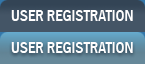
<style>
.page{position:relative;width:145px;height:64px;background:#445566}
.page>*{position:absolute;margin:0}
.t1{font:16px "FranklinGothic-MediumCond";color:#fffefe}
</style>
<div class="page">
<p class="t1" style="left:11px;top:10px;width:122px;height:11px">USER REGISTRATION</p>
<p class="t1" style="left:11px;top:42px;width:122px;height:11px">USER REGISTRATION</p>
</div>
